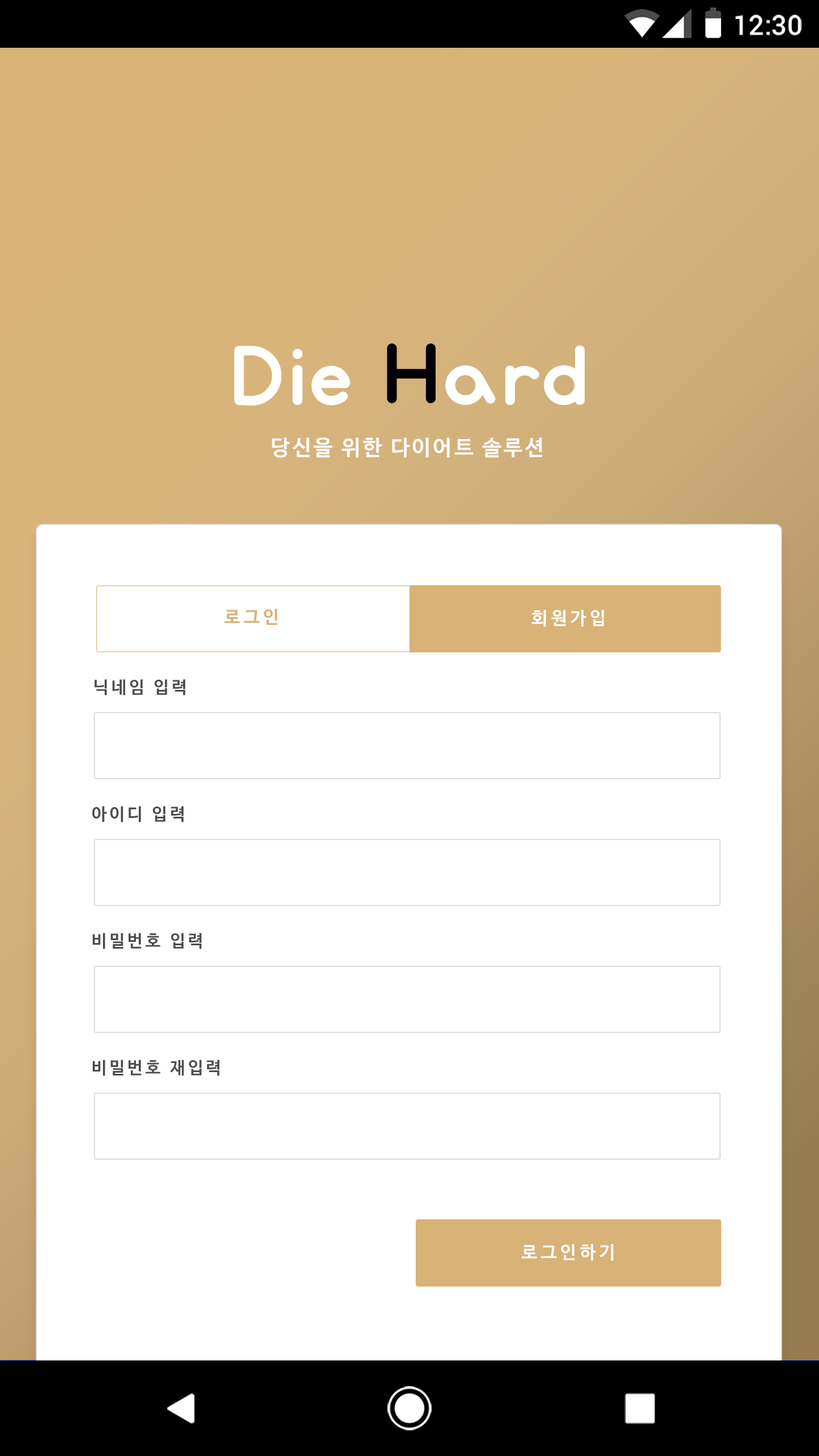
<style>
.page{position:relative;width:819px;height:1456px;background:#ffffff}
.page>*{position:absolute;margin:0}
.t1{font:27.3px "Roboto-Medium";color:#ffffff}
.t2{font:21.4px "NanumBarunGothicBold";letter-spacing:0.1em;color:#ffffff}
.t3{font:18px "NanumBarunGothicBold";letter-spacing:0.2em;color:#d8b276}
.t4{font:18px "NanumBarunGothicBold";letter-spacing:0.2em;color:#ffffff}
.t5{font:17.1px "NanumBarunGothicBold";letter-spacing:0.16em;color:#4d4d4d}
</style>
<div class="page">
<p class="t1" style="left:735px;top:15px;width:67px;height:21px">12:30</p>
<p class="t2" style="left:272px;top:437px;width:271px;height:21px">당신을 위한 다이어트 솔루션</p>
<p class="t3" style="left:224px;top:609px;width:54px;height:16px">로그인</p>
<p class="t4" style="left:532px;top:610px;width:72px;height:17px">회원가입</p>
<p class="t5" style="left:94px;top:679px;width:91px;height:17px">닉네임 입력</p>
<p class="t5" style="left:92px;top:806px;width:92px;height:16px">아이디 입력</p>
<p class="t5" style="left:93px;top:933px;width:109px;height:16px">비밀번호 입력</p>
<p class="t5" style="left:93px;top:1060px;width:127px;height:16px">비밀번호 재입력</p>
<p class="t4" style="left:522px;top:1244px;width:92px;height:17px">로그인하기</p>
</div>
